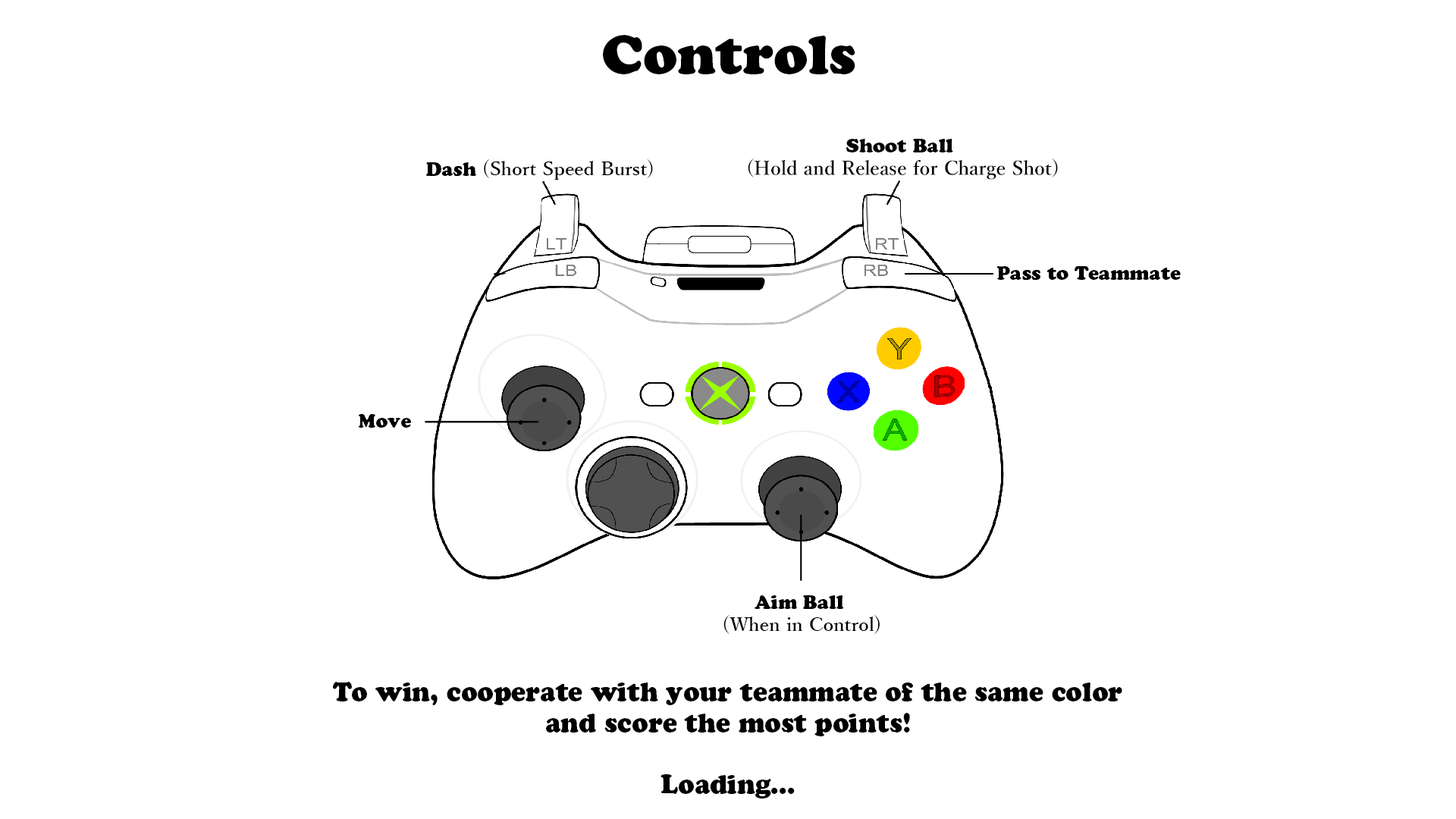
<style>
.page{position:relative;width:1456px;height:819px;background:#ffffff}
.page>*{position:absolute;margin:0}
.t1{font:54.6px "CooperBlackStd";color:#000000}
.t2{font:19.1px "YuMincho-Demibold";color:#000000}
.t3{font:19.1px "CooperBlackStd";color:#000000}
.t4{font:19px "YuMincho-Demibold";color:#000000}
.t5{font:19px "CooperBlackStd";color:#000000}
.t6{font:25.8px "CooperBlackStd";color:#000000}
</style>
<div class="page">
<p class="t1" style="left:603px;top:35px;width:252px;height:39px">Controls</p>
<p class="t2" style="left:748px;top:139px;width:310px;height:41px;text-align:center"><span class="t3">Shoot Ball</span> <br>(Hold and Release for Charge Shot)</p>
<p class="t4" style="left:425px;top:159px;width:228px;height:21px"><span class="t5">Dash</span> (Short Speed Burst)</p>
<p class="t3" style="left:996px;top:265px;width:185px;height:16px">Pass to Teammate</p>
<p class="t3" style="left:358px;top:414px;width:53px;height:14px">Move</p>
<p class="t4" style="left:723px;top:595px;width:157px;height:39px;text-align:center"><span class="t5">Aim Ball</span> <br>(When in Control)</p>
<p class="t6" style="left:333px;top:682px;width:789px;height:117px;text-align:center">To win, cooperate with your teammate of the same color<br>and score the most points!<br><br>Loading...</p>
</div>
